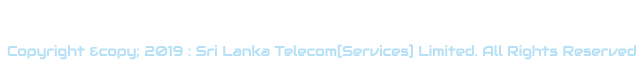
<style>
.page{position:relative;width:640px;height:60px;background:#ffffff}
.page>*{position:absolute;margin:0}
.t1{font:14px "Audiowide-Regular";color:#b6e0f6}
</style>
<div class="page">
<p class="t1" style="left:7px;top:44px;width:629px;height:16px">Copyright &amp;copy; 2019 : Sri Lanka Telecom[Services] Limited. All Rights Reserved</p>
</div>
